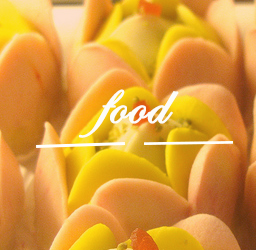
<style>
.page{position:relative;width:256px;height:250px}
.page>*{position:absolute;margin:0}
.t1{font:60px "EdwardianScriptITC";color:#fcfcf9;font-weight:bold}
</style>
<div class="page">
<p class="t1" style="left:78px;top:89px;width:101px;height:49px">food</p>
</div>
